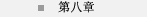
<style>
.page{position:relative;width:147px;height:17px;background:#f1f1f1}
.page>*{position:absolute;margin:0}
.t1{font:12px "SimSun";color:#000000;font-weight:bold}
</style>
<div class="page">
<p class="t1" style="left:38px;top:0px;width:77px;height:16px">第八章</p>
</div>
